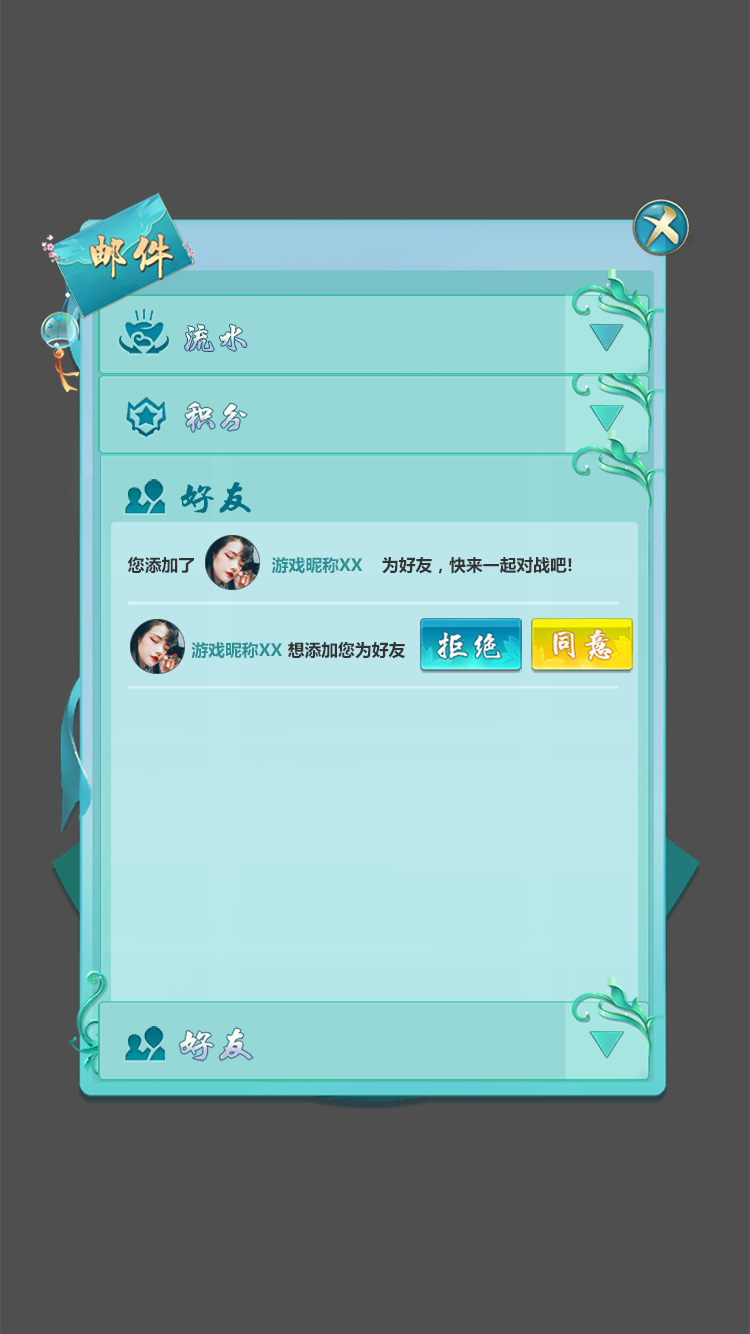
<style>
.page{position:relative;width:750px;height:1334px;background:#4f4f4f}
.page>*{position:absolute;margin:0}
.t1{font:33.7px "HYChengXingJ"}
.t2{font:36.2px "HYChengXingJ";letter-spacing:-0.1em;color:#007082}
.t3{font:16.8px "MicrosoftYaHei-Bold";color:#333333}
.t4{font:16.8px "MicrosoftYaHei-Bold";color:#2c8f93}
</style>
<div class="page">
<p class="t1" style="left:185px;top:324px;width:62px;height:27px">流水</p>
<p class="t2" style="left:180px;top:481px;width:71px;height:32px">好 友</p>
<p class="t3" style="left:128px;top:557px;width:66px;height:17px">您添加了</p>
<p class="t4" style="left:271px;top:557px;width:92px;height:17px">游戏昵称XX</p>
<p class="t3" style="left:382px;top:557px;width:190px;height:17px">为好友，快来一起对战吧!</p>
<p class="t4" style="left:191px;top:642px;width:91px;height:17px">游戏昵称XX</p>
<p class="t3" style="left:288px;top:642px;width:117px;height:17px">想添加您为好友</p>
</div>
